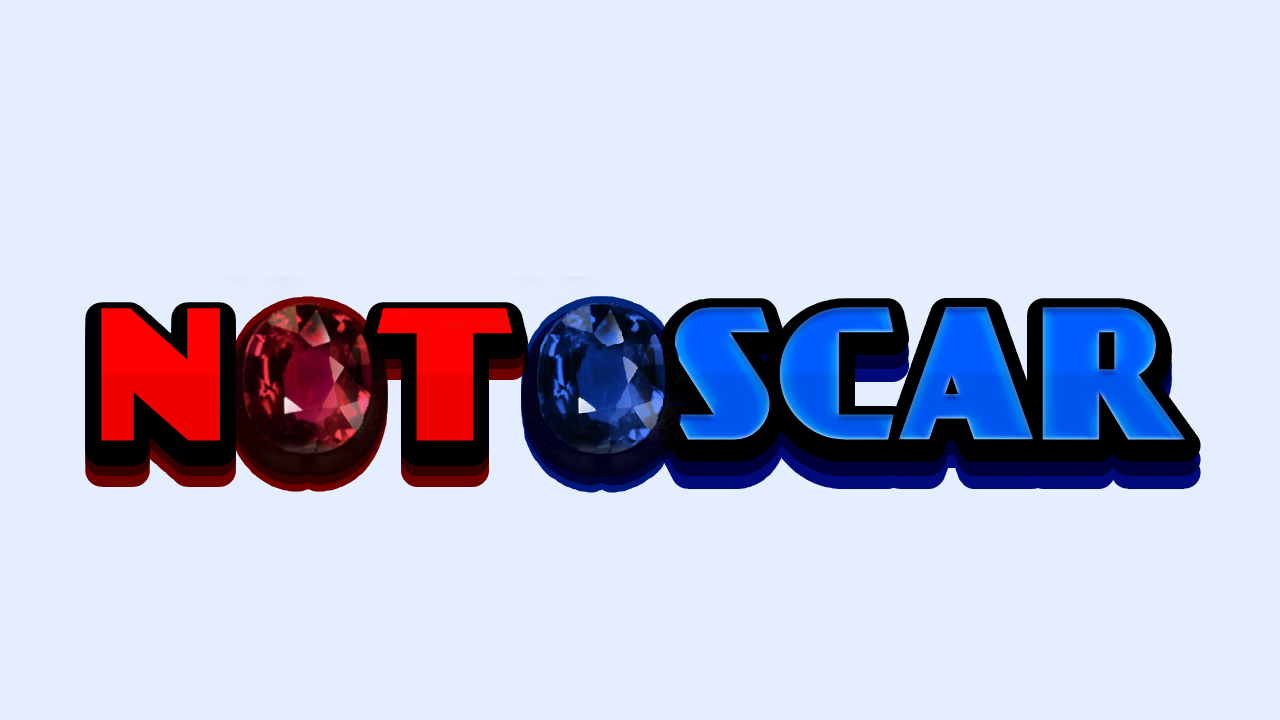
<style>
.page{position:relative;width:1280px;height:720px;background:#e4eeff}
.page>*{position:absolute;margin:0}
.t1{font:198px "DayPosterBlack";color:#fd0000}
.t2{font:198px "DayPosterBlack";color:#005cef}
</style>
<div class="page">
<p class="t1" style="left:101px;top:308px;width:412px;height:133px">n  t</p>
<p class="t2" style="left:674px;top:307px;width:512px;height:133px">scar</p>
</div>
